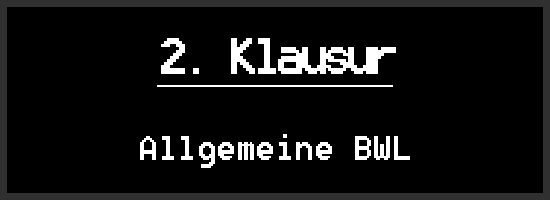
<style>
.page{position:relative;width:550px;height:200px;background:#000000}
.page>*{position:absolute;margin:0}
.t1{font:50px "8514oem";color:#ffffff;text-decoration:underline}
.t2{font:41.7px "8514oem";color:#ffffff}
</style>
<div class="page">
<p class="t1" style="left:157px;top:38px;width:239px;height:49px">2. Klausur</p>
<p class="t2" style="left:140px;top:134px;width:270px;height:34px">Allgemeine BWL</p>
</div>
